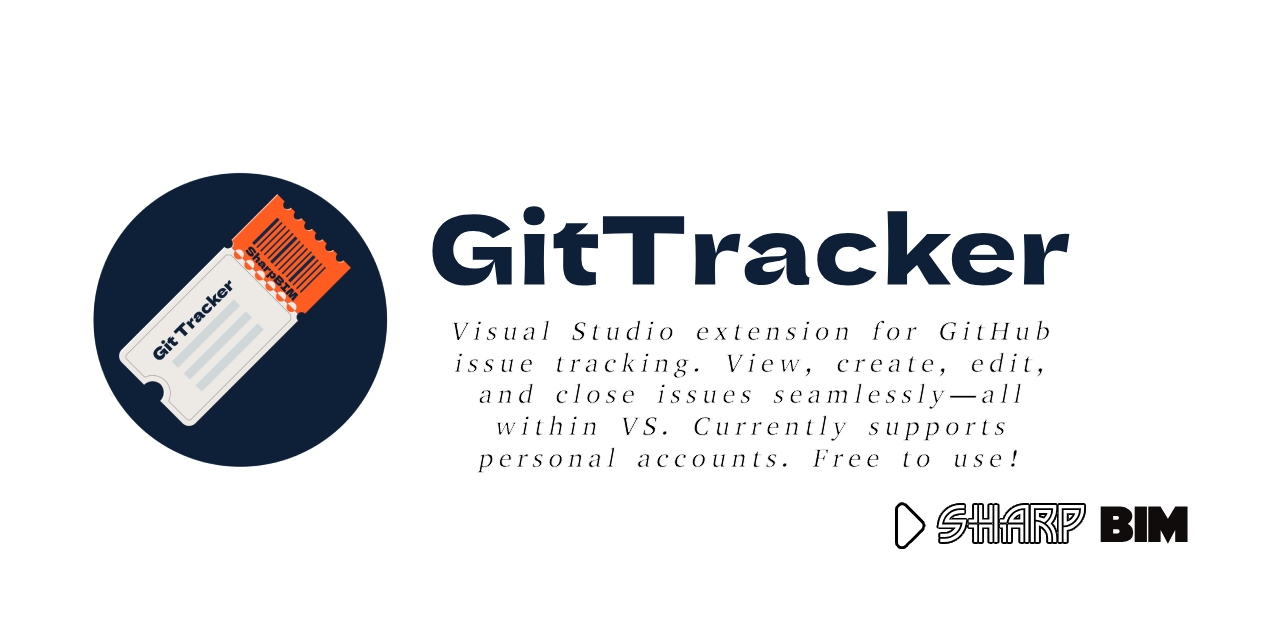
<style>
.page{position:relative;width:1280px;height:640px;background:#ffffff}
.page>*{position:absolute;margin:0}
.t1{font:98px "DelaGothicOne-Regular";color:#0e2038}
.t2{font:26.3px "AbyssinicaSIL-Regular";letter-spacing:0.196em;font-style:italic}
</style>
<div class="page">
<p class="t1" style="left:428px;top:202px;width:646px;height:87px">GitTracker</p>
<p class="t2" style="left:451px;top:319px;width:600px;height:155px;text-align:center">Visual Studio extension for GitHub issue tracking. View, create, edit, and close issues seamlessly—all within VS. Currently supports personal accounts. Free to use!</p>
</div>
